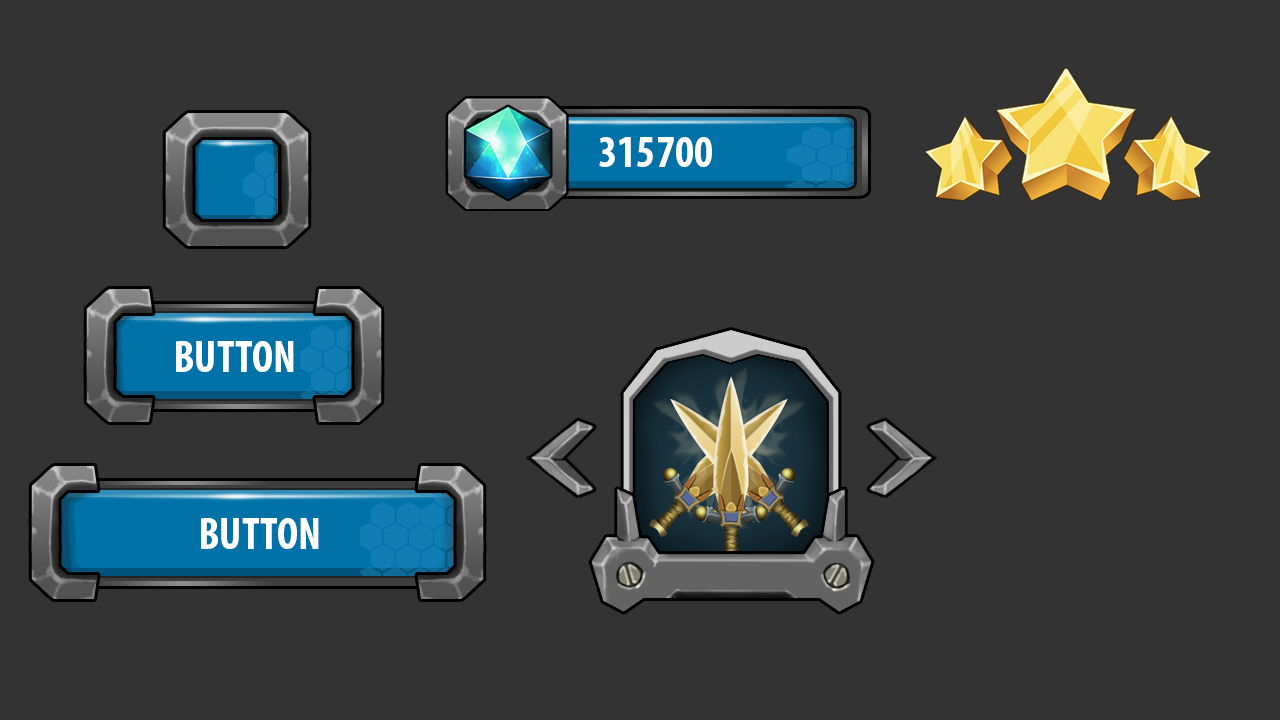
<style>
.page{position:relative;width:1280px;height:720px;background:#333333}
.page>*{position:absolute;margin:0}
.t1{font:45px "MyriadPro-BoldCond";color:#ffffff;text-transform:uppercase}
</style>
<div class="page">
<p class="t1" style="left:599px;top:137px;width:113px;height:30px">315700</p>
<p class="t1" style="left:176px;top:341px;width:118px;height:31px">Button</p>
<p class="t1" style="left:201px;top:518px;width:118px;height:31px">Button</p>
</div>
